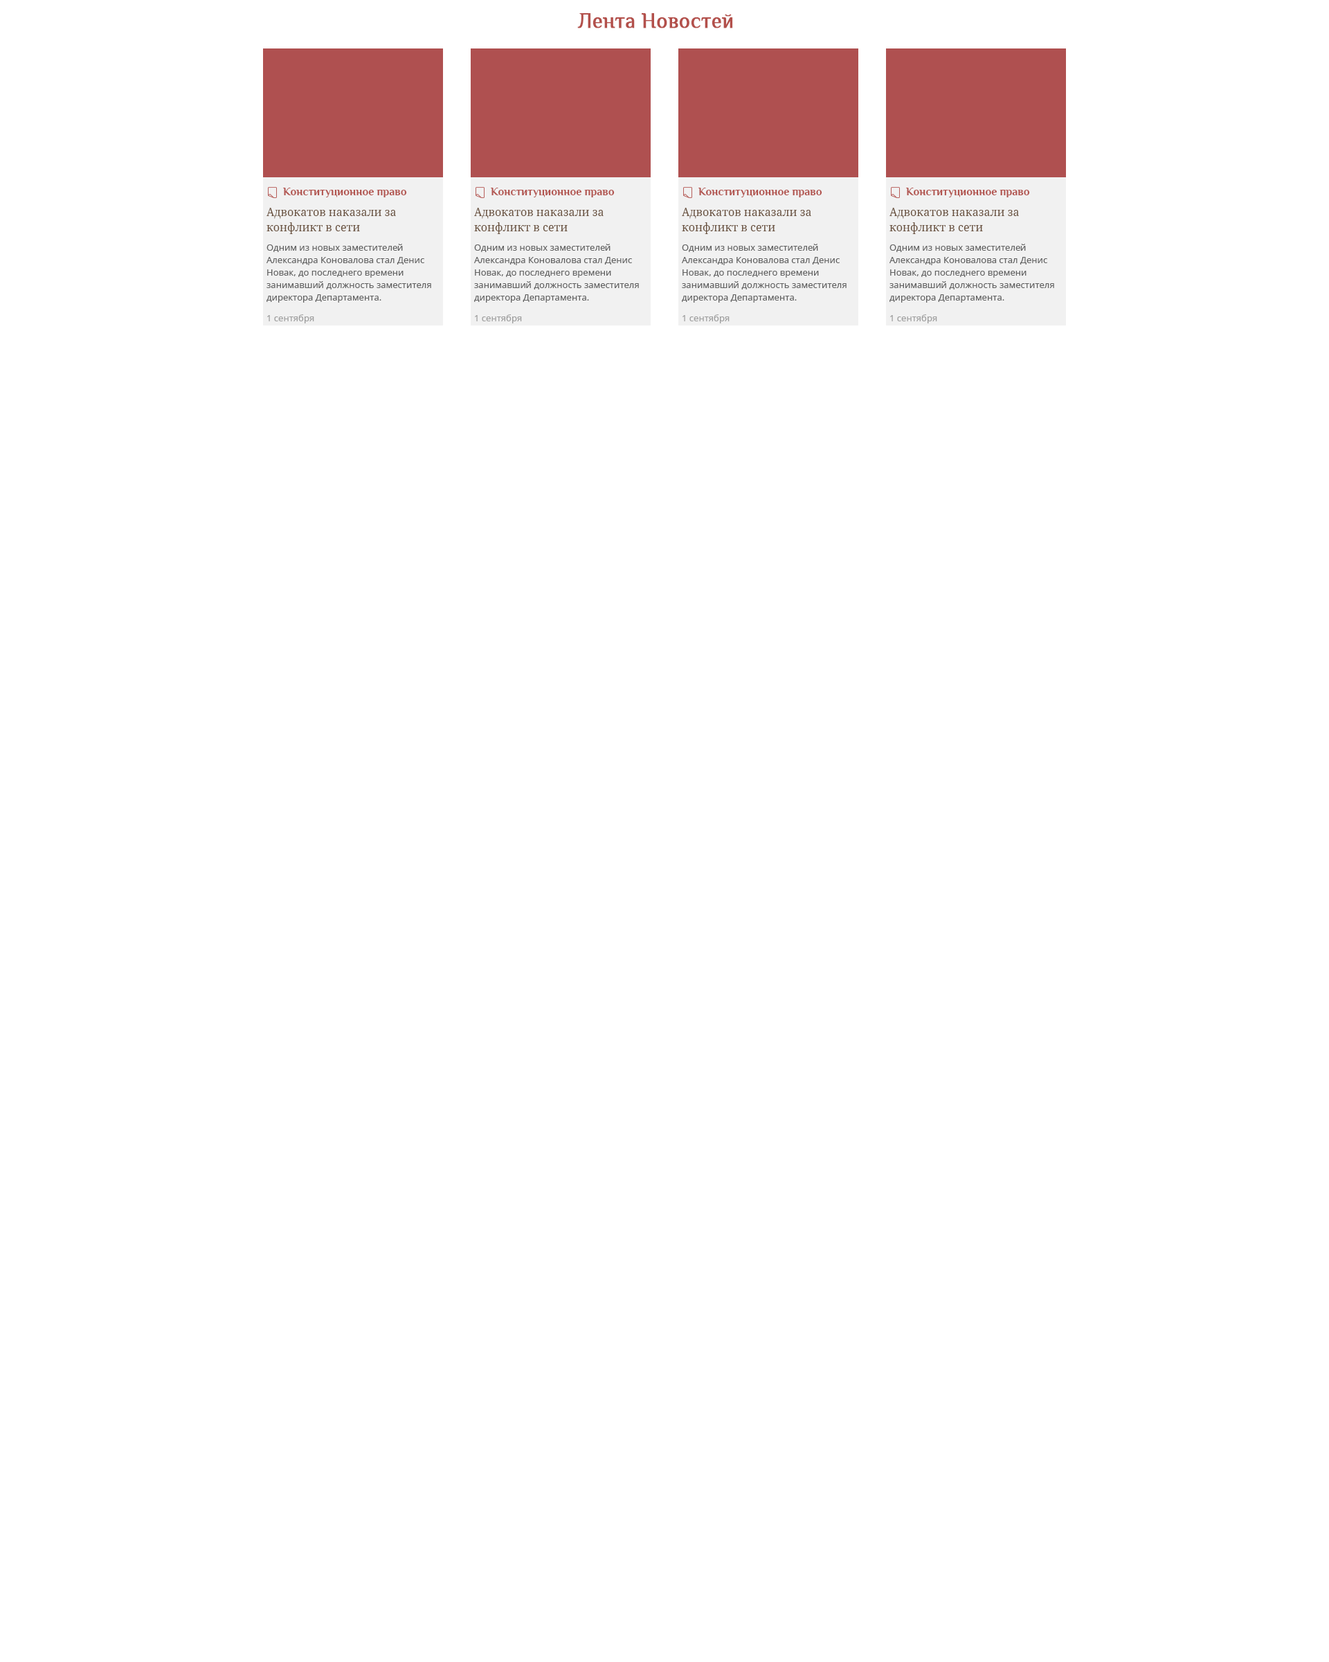
<style>
.page{position:relative;width:1329px;height:1662px;background:#ffffff}
.page>*{position:absolute;margin:0}
.t1{font:20.8px "Philosopher-Regular";color:#b3504b;font-weight:bold}
.t2{font:9px/12.5px "NotoSans";color:#616161}
.t3{font:11.1px/12.5px "Philosopher-Bold";color:#b2544f}
.t4{font:11.1px/15.2px "NotoSerif";color:#69513e}
.t5{font:9px/15.2px "NotoSans";color:#9e9e9e}
</style>
<div class="page">
<p class="t1" style="left:577px;top:13px;width:156px;height:15px">Лента Новостей</p>
<p class="t2" style="left:267px;top:188px;width:164px;height:135px"><span class="t3">      Конституционное право<br> <br></span><span class="t4">Адвокатов наказали за <br>конфликт в сети<br>  <br> <br></span>Одним из новых заместителей Александра Коновалова стал Денис Новак, до последнего времени занимавший должность заместителя директора Департамента.<br><br><span class="t5">1 сентября</span></p>
<p class="t2" style="left:474px;top:188px;width:165px;height:135px"><span class="t3">      Конституционное право<br> <br></span><span class="t4">Адвокатов наказали за <br>конфликт в сети<br>  <br> <br></span>Одним из новых заместителей Александра Коновалова стал Денис Новак, до последнего времени занимавший должность заместителя директора Департамента.<br><br><span class="t5">1 сентября</span></p>
<p class="t2" style="left:682px;top:188px;width:165px;height:135px"><span class="t3">      Конституционное право<br> <br></span><span class="t4">Адвокатов наказали за <br>конфликт в сети<br>  <br> <br></span>Одним из новых заместителей Александра Коновалова стал Денис Новак, до последнего времени занимавший должность заместителя директора Департамента.<br><br><span class="t5">1 сентября</span></p>
<p class="t2" style="left:890px;top:188px;width:164px;height:135px"><span class="t3">      Конституционное право<br> <br></span><span class="t4">Адвокатов наказали за <br>конфликт в сети<br>  <br> <br></span>Одним из новых заместителей Александра Коновалова стал Денис Новак, до последнего времени занимавший должность заместителя директора Департамента.<br><br><span class="t5">1 сентября</span></p>
</div>
